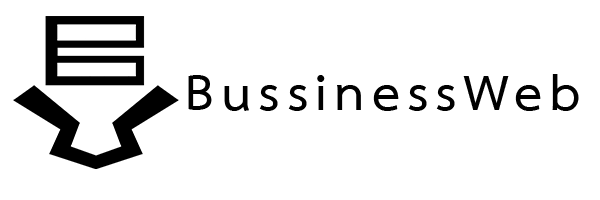
<style>
.page{position:relative;width:600px;height:200px;background:#ffffff}
.page>*{position:absolute;margin:0}
.t1{font:72px "THSarabunNew-Bold";letter-spacing:0.1em;color:#000000}
</style>
<div class="page">
<p class="t1" style="left:188px;top:74px;width:391px;height:37px">BussinessWeb</p>
</div>
